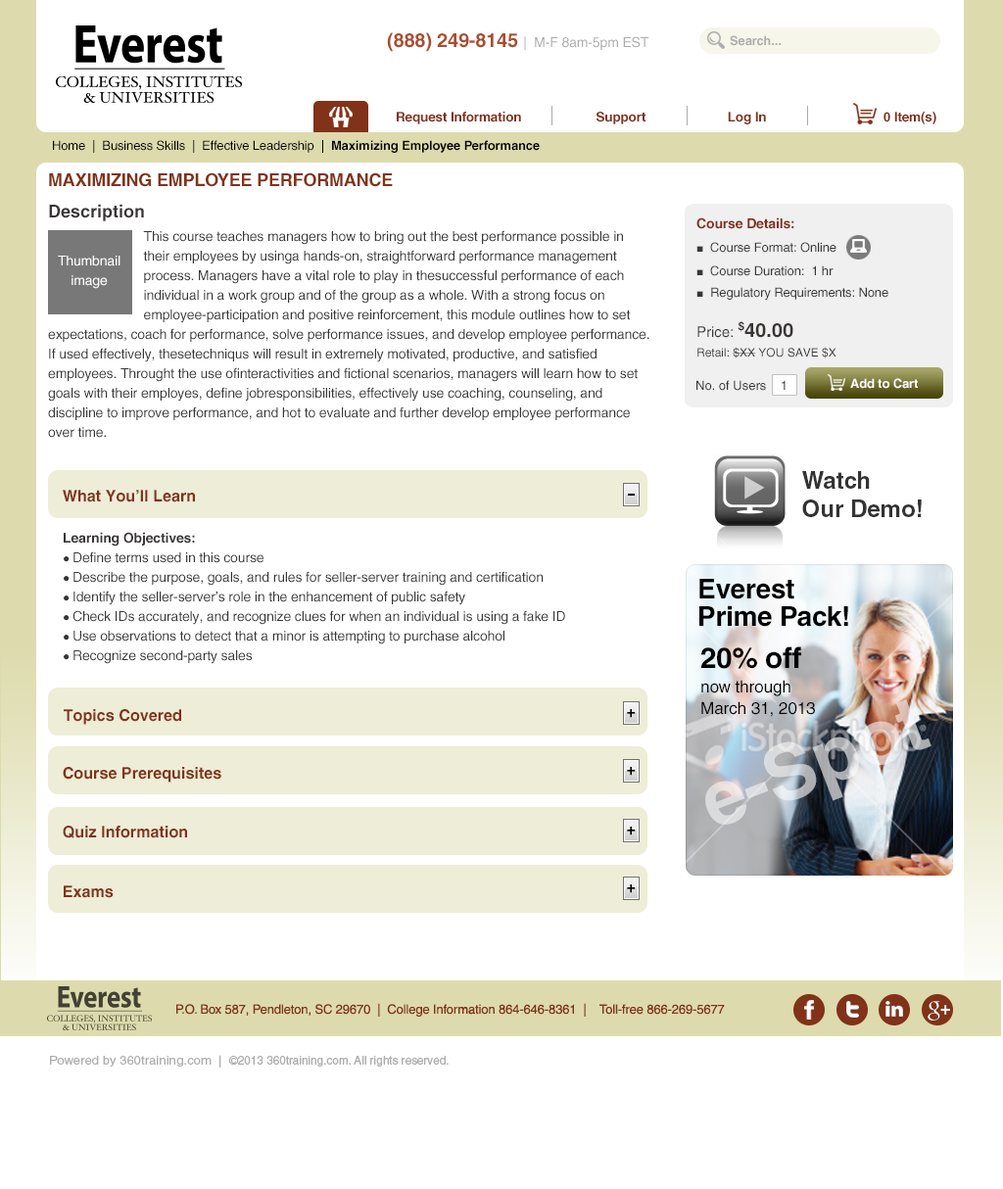
<style>
.page{position:relative;width:1003px;height:1189px;background:#ffffff}
.page>*{position:absolute;margin:0}
.t1{font:13.7px "Helvetica";letter-spacing:-0.01em;color:#adabab}
.t2{font:19.6px "Helvetica-Bold";letter-spacing:-0.01em;color:#aa4d2e}
.t3{font:12.7px "Helvetica-Bold";letter-spacing:-0.01em;color:#adabab}
.t4{font:13.2px "Helvetica-Bold";letter-spacing:-0.01em;color:#813218}
.t5{font:12.7px "Helvetica";letter-spacing:-0.01em;color:#000000}
.t6{font:12.7px "Helvetica-Bold";letter-spacing:-0.01em;color:#000000}
.t7{font:17.6px "Helvetica-Bold";letter-spacing:-0.01em;color:#813218;text-transform:uppercase}
.t8{font:17.6px "Helvetica-Bold";color:#393535}
.t9{font:12.7px/21.5px "Helvetica";letter-spacing:-0.01em;color:#393535}
.t10{font:13.7px/19.6px "Helvetica-Bold";letter-spacing:-0.01em;color:#813218}
.t11{font:11.8px/23.5px "ArialMT";letter-spacing:-0.01em;color:#393535}
.t12{font:12.7px/23.5px "Helvetica";letter-spacing:-0.01em;color:#393535}
.t13{font:11.8px/21.5px "ArialMT";letter-spacing:-0.01em;color:#393535}
.t14{font:13.7px/19.6px "Helvetica";letter-spacing:-0.01em;color:#393535}
.t15{font:13.7px/19.6px "Helvetica";letter-spacing:-0.01em;color:#ffffff}
.t16{font:11.8px/19.6px "Helvetica";color:#393535}
.t17{font:14.7px/19.6px "Helvetica";color:#393535}
.t18{font:19.6px/19.6px "Helvetica-Bold";color:#393535}
.t19{font:12.7px "Helvetica";color:#393535}
.t20{font:12.7px "Helvetica-Bold";letter-spacing:-0.01em;color:#ffffff}
.t21{font:23.5px "Helvetica-Bold";color:#333333}
.t22{font:16.2px "Helvetica-Bold";color:#813218}
.t23{font:13.7px/19.6px "Helvetica-Bold";letter-spacing:-0.01em;color:#393535}
.t24{font:11.8px/19.6px "ArialMT";letter-spacing:-0.01em;color:#393535}
.t25{font:27.4px/27.4px "Helvetica-Bold";letter-spacing:-0.01em;color:#000000}
.t26{font:27.4px/19.6px "Helvetica-Bold";letter-spacing:-0.01em;color:#000000}
.t27{font:16.9px/21.7px "Helvetica";letter-spacing:-0.01em;color:#000000}
.t28{font:28.9px/24.1px "Helvetica-Bold";letter-spacing:-0.01em;color:#000000}
.t29{font:16.9px/24.1px "Helvetica";letter-spacing:-0.01em;color:#000000}
.t30{font:12.7px "Helvetica";letter-spacing:-0.01em;color:#813218}
.t31{font:11.8px "Helvetica";letter-spacing:-0.01em;color:#adabab}
.t32{font:11.8px "Helvetica";color:#adabab;scale:1.1 1}
</style>
<div class="page">
<p class="t1" style="left:387px;top:32px;width:262px;height:20px"><span class="t2">(888) 249-8145 </span>|  M-F 8am-5pm EST</p>
<p class="t3" style="left:730px;top:35px;width:51px;height:11px">Search...</p>
<p class="t4" style="left:397px;top:112px;width:539px;height:12px">Request Information                     Support                       Log In                                 0 Item(s)</p>
<p class="t5" style="left:53px;top:140px;width:487px;height:13px">Home  |  Business Skills  |  Effective Leadership  |  <span class="t6">Maximizing Employee Performance</span></p>
<p class="t7" style="left:49px;top:172px;width:344px;height:15px">Maximizing Employee Performance</p>
<p class="t8" style="left:49px;top:204px;width:95px;height:17px">Description</p>
<p class="t9" style="left:696px;top:217px;width:192px;height:83px"><span class="t10">Course Details:<br></span><span class="t11">■  </span><span class="t12">Course Format: Online<br></span><span class="t11">■  </span><span class="t12">Course Duration:  1 hr<br></span><span class="t13">■  </span>Regulatory Requirements: None</p>
<p class="t14" style="left:48px;top:230px;width:601px;height:208px">This course teaches managers how to bring out the best performance possible in <br>                          their employees by usinga hands-on, straightforward performance management <br>                          process. Managers have a vital role to play in thesuccessful performance of each <br>                          individual in a work group and of the group as a whole. With a strong focus on <br>                          employee-participation and positive reinforcement, this module outlines how to set <br>expectations, coach for performance, solve performance issues, and develop employee performance. <br>If used effectively, thesetechniqus will result in extremely motivated, productive, and satisfied <br>employees. Throught the use ofinteractivities and fictional scenarios, managers will learn how to set <br>goals with their employes, define jobresponsibilities, effectively use coaching, counseling, and <br>discipline to improve performance, and hot to evaluate and further develop employee performance <br>over time.</p>
<p class="t15" style="left:58px;top:256px;width:62px;height:33px;text-align:center">Thumbnail<br>image</p>
<p class="t16" style="left:697px;top:321px;width:139px;height:37px"><span class="t17">Price: </span><span class="t18">$40.00<br></span>Retail: $XX YOU SAVE $X</p>
<p class="t19" style="left:696px;top:380px;width:89px;height:11px">No. of Users    1</p>
<p class="t20" style="left:850px;top:378px;width:68px;height:11px">Add to Cart</p>
<p class="t21" style="left:802px;top:471px;width:120px;height:46px">Watch <br>Our Demo!</p>
<p class="t22" style="left:63px;top:490px;width:132px;height:12px">What You’ll Learn</p>
<p class="t14" style="left:64px;top:532px;width:501px;height:132px"><span class="t23">Learning Objectives:<br></span><span class="t24">● </span>Define terms used in this course<br><span class="t24">● </span>Describe the purpose, goals, and rules for seller-server training and certification<br><span class="t24">● </span>Identify the seller-server’s role in the enhancement of public safety<br><span class="t24">● </span>Check IDs accurately, and recognize clues for when an individual is using a fake ID<br><span class="t24">● </span>Use observations to detect that a minor is attempting to purchase alcohol<br><span class="t24">● </span>Recognize second-party sales</p>
<p class="t25" style="left:699px;top:579px;width:149px;height:48px"><span class="t26">Everest <br></span>Prime Pack!</p>
<p class="t27" style="left:700px;top:646px;width:115px;height:71px"><span class="t28">20% off<br></span><span class="t29">now through<br></span>March 31, 2013</p>
<p class="t22" style="left:64px;top:709px;width:117px;height:16px">Topics Covered</p>
<p class="t22" style="left:63px;top:767px;width:158px;height:16px">Course Prerequisites</p>
<p class="t22" style="left:63px;top:826px;width:124px;height:12px">Quiz Information</p>
<p class="t22" style="left:64px;top:885px;width:50px;height:13px">Exams</p>
<p class="t30" style="left:176px;top:1003px;width:549px;height:14px">P.O. Box 587, Pendleton, SC 29670  |  College Information 864-646-8361  |    Toll-free 866-269-5677</p>
<p class="t31" style="left:50px;top:1055px;width:399px;height:13px"><span class="t32">Powered by 360training.com  |  </span>©2013 360training.com. All rights reserved.</p>
</div>
